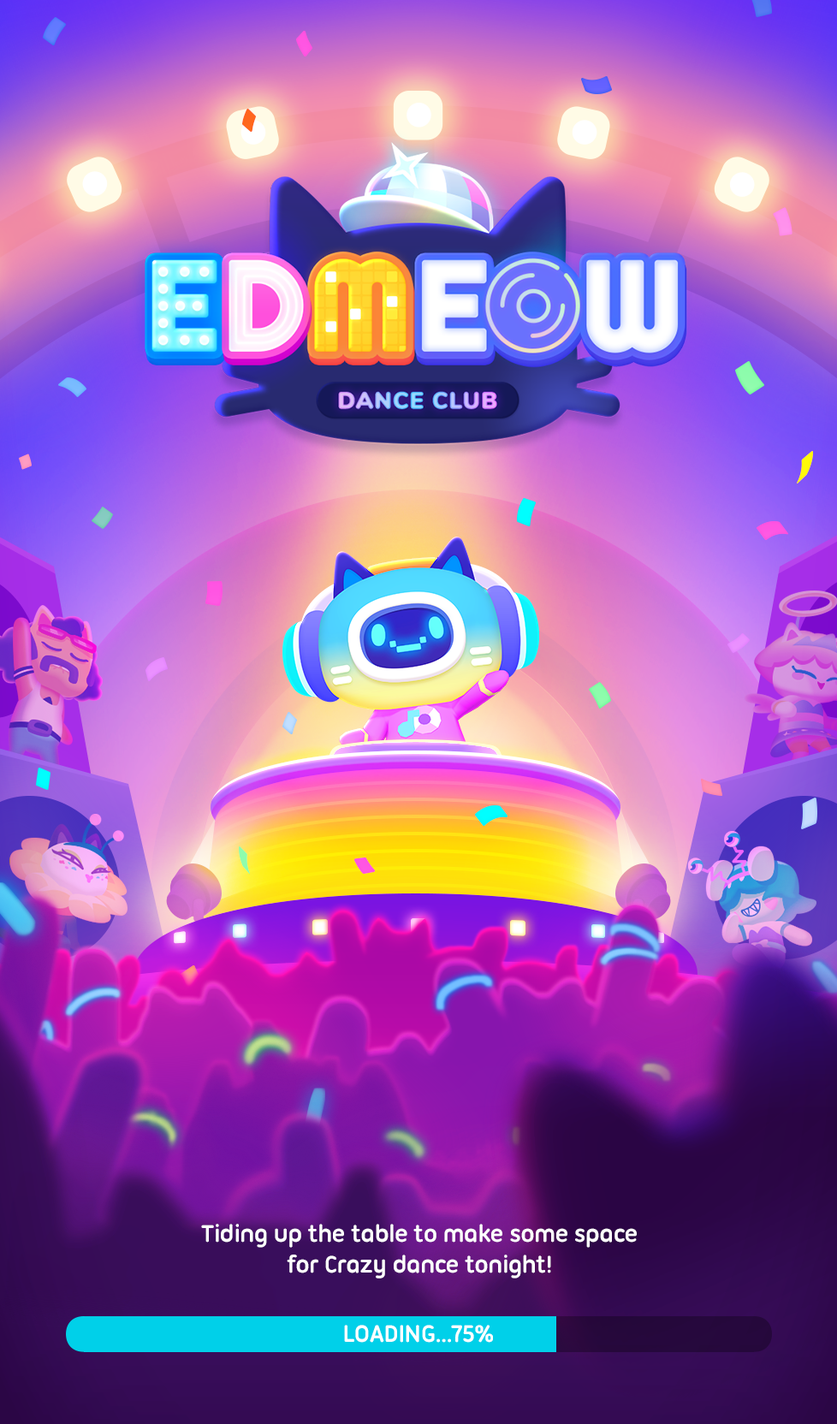
<style>
.page{position:relative;width:837px;height:1424px}
.page>*{position:absolute;margin:0}
.t1{font:25.7px/30.8px "UbuntuTitling-Bold";letter-spacing:-0.025em;color:#ffffff}
.t2{font:25.7px "UbuntuTitling-Bold";letter-spacing:-0.025em;color:#ffffff;text-transform:uppercase}
</style>
<div class="page">
<p class="t1" style="left:201px;top:1224px;width:436px;height:55px;text-align:center">Tiding up the table to make some space<br>for Crazy dance tonight!</p>
<p class="t2" style="left:344px;top:1325px;width:149px;height:18px">Loading...75%</p>
</div>
